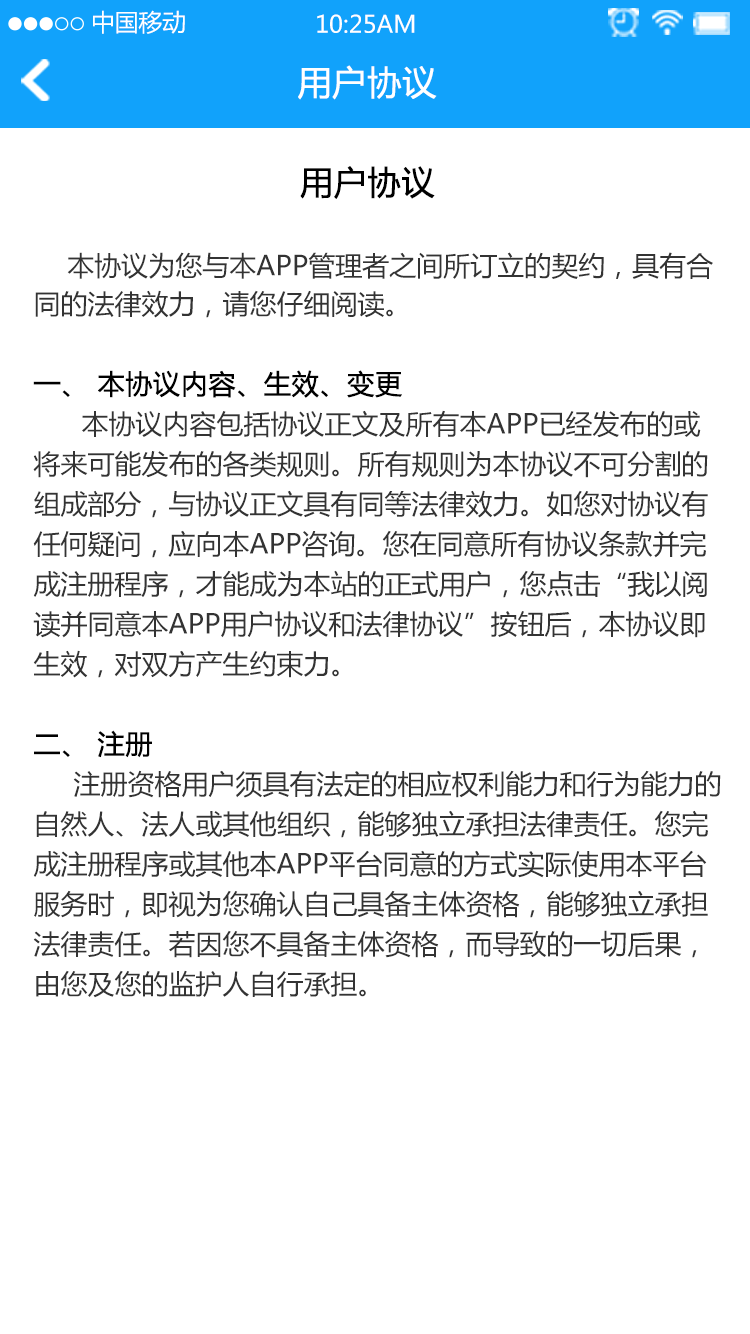
<style>
.page{position:relative;width:750px;height:1334px;background:#ffffff}
.page>*{position:absolute;margin:0}
.t1{font:23.7px "MicrosoftYaHei";color:#ffffff}
.t2{font:34px "MicrosoftYaHei";color:#ffffff;font-weight:bold}
.t3{font:33px "MicrosoftYaHei";color:#000000;font-weight:bold}
.t4{font:27px/40px "MicrosoftYaHei";color:#333333}
.t5{font:29px/40px "MicrosoftYaHei";color:#333333}
.t6{font:27px/40px "MicrosoftYaHei";color:#000000;font-weight:bold}
</style>
<div class="page">
<p class="t1" style="left:93px;top:10px;width:92px;height:24px">中国移动</p>
<p class="t1" style="left:317px;top:14px;width:98px;height:19px">10:25AM</p>
<p class="t2" style="left:298px;top:65px;width:139px;height:35px">用户协议</p>
<p class="t3" style="left:300px;top:166px;width:135px;height:33px">用户协议</p>
<p class="t4" style="left:33px;top:252px;width:688px;height:746px"><span class="t5">   </span> 本协议为您与本APP管理者之间所订立的契约，具有合同的法律效力，请您仔细阅读。<br><br><span class="t6">一、 本协议内容、生效、变更  <br></span>      本协议内容包括协议正文及所有本APP已经发布的或将来可能发布的各类规则。所有规则为本协议不可分割的组成部分，与协议正文具有同等法律效力。如您对协议有任何疑问，应向本APP咨询。您在同意所有协议条款并完成注册程序，才能成为本站的正式用户，您点击“我以阅读并同意本APP用户协议和法律协议”按钮后，本协议即生效，对双方产生约束力。<br><br><span class="t6">二、 注册 </span> <br>     注册资格用户须具有法定的相应权利能力和行为能力的自然人、法人或其他组织，能够独立承担法律责任。您完成注册程序或其他本APP平台同意的方式实际使用本平台服务时，即视为您确认自己具备主体资格，能够独立承担法律责任。若因您不具备主体资格，而导致的一切后果，由您及您的监护人自行承担。</p>
</div>
